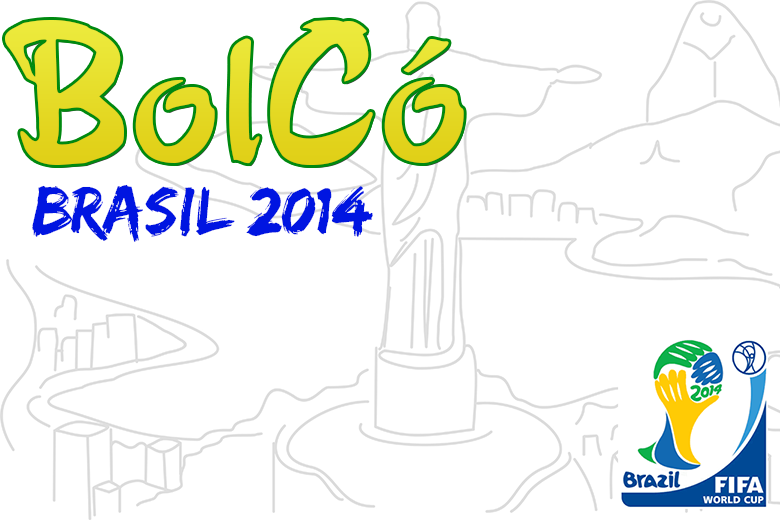
<style>
.page{position:relative;width:780px;height:520px;background:#ffffff}
.page>*{position:absolute;margin:0}
.t1{font:200px "PoloBrush";color:#e5da26}
.t2{font:58.3px "Edo";color:#0015e1}
.t3{font:200px "Edo";color:#0015e1}
</style>
<div class="page">
<p class="t1" style="left:5px;top:20px;width:459px;height:145px">BolCó</p>
<p class="t2" style="left:32px;top:184px;width:341px;height:58px"><span class="t3"><br></span>BRASIL 2014</p>
</div>
